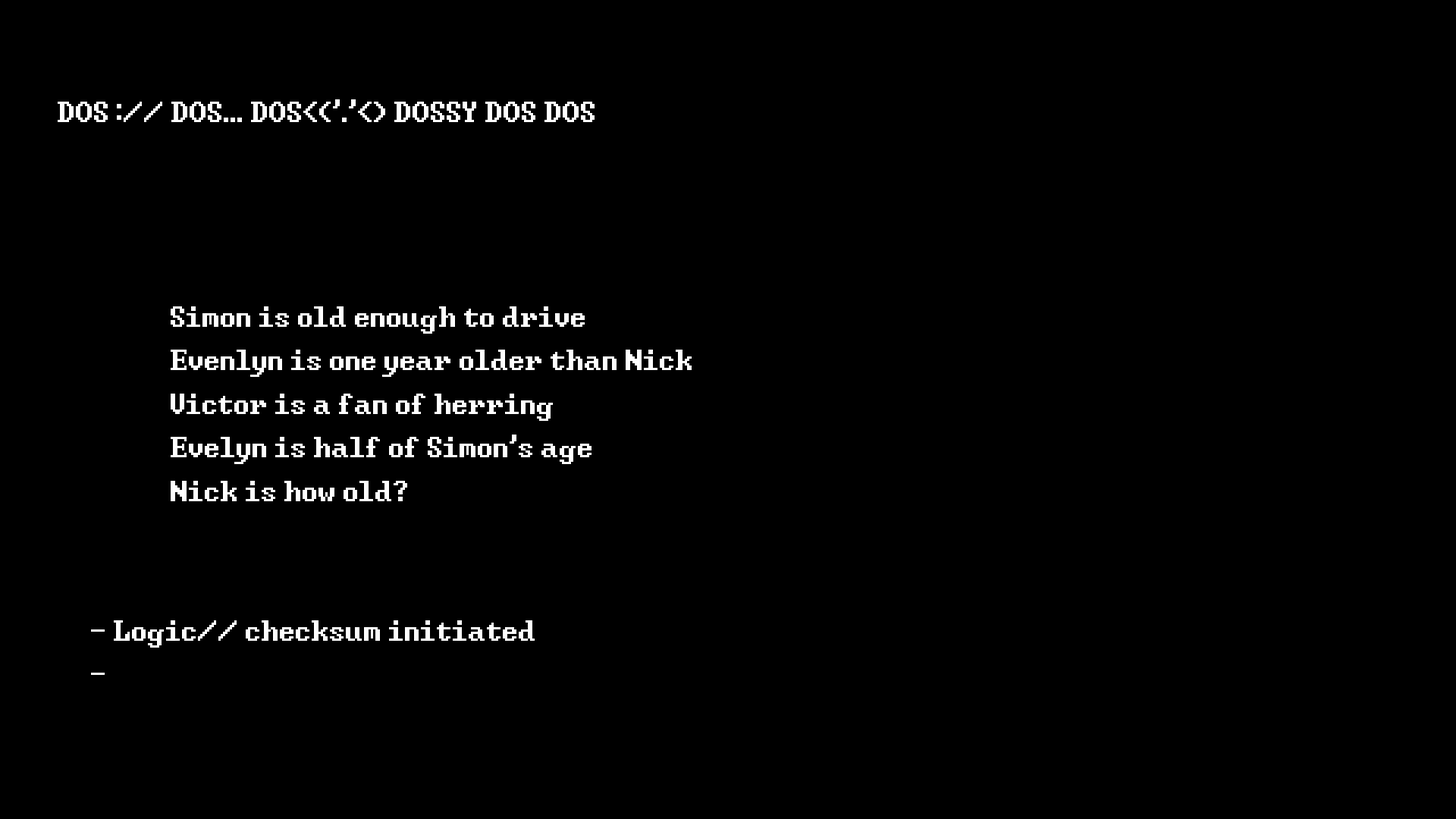
<style>
.page{position:relative;width:1456px;height:819px;background:#000000}
.page>*{position:absolute;margin:0}
.t1{font:36.4px "Windows-Command-Prompt";color:#ffffff}
</style>
<div class="page">
<p class="t1" style="left:58px;top:99px;width:537px;height:23px">DOS :// DOS... DOS&lt;('.'&lt;) DOSSY DOS DOS</p>
<p class="t1" style="left:171px;top:306px;width:521px;height:195px">Simon is old enough to drive <br>Evenlyn is one year older than Nick<br>Victor is a fan of herring<br>Evelyn is half of Simon's age<br>Nick is how old?</p>
<p class="t1" style="left:91px;top:620px;width:444px;height:55px">- Logic// checksum initiated<br>-</p>
</div>
